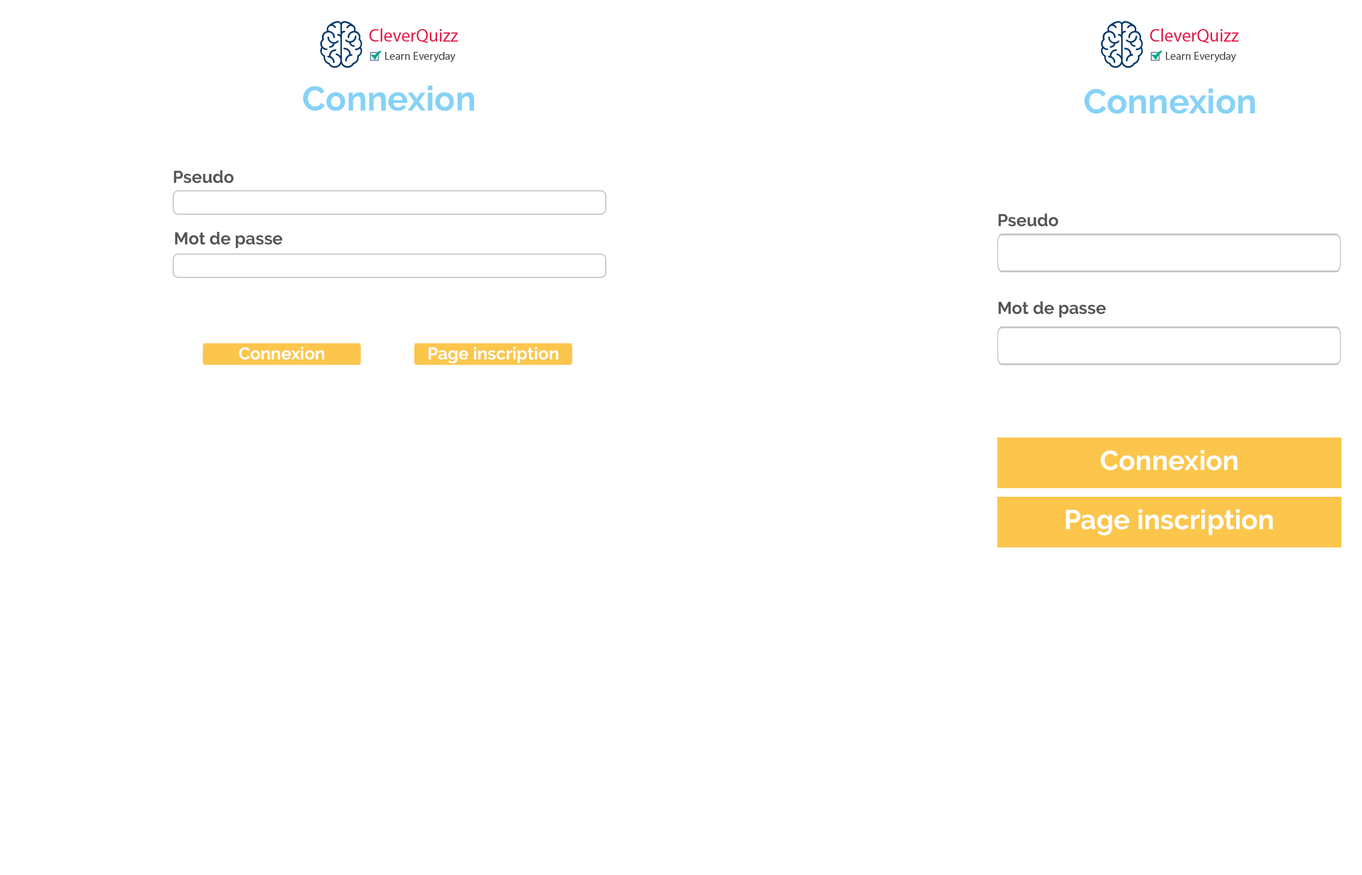
<style>
.page{position:relative;width:1362px;height:875px;background:#ffffff}
.page>*{position:absolute;margin:0}
.t1{font:34.2px "Raleway-Bold";color:#86d2f7}
.t2{font:17.1px "Raleway-Bold";color:#555555}
.t3{font:17.1px "Raleway-Bold";color:#ffffff}
.t4{font:27.4px "Raleway-Bold";color:#ffffff}
</style>
<div class="page">
<p class="t1" style="left:303px;top:85px;width:171px;height:26px">Connexion</p>
<p class="t1" style="left:1084px;top:88px;width:171px;height:26px">Connexion</p>
<p class="t2" style="left:174px;top:170px;width:60px;height:14px">Pseudo</p>
<p class="t2" style="left:999px;top:214px;width:59px;height:13px">Pseudo</p>
<p class="t2" style="left:175px;top:232px;width:108px;height:16px">Mot de passe</p>
<p class="t2" style="left:999px;top:301px;width:107px;height:17px">Mot de passe</p>
<p class="t3" style="left:239px;top:347px;width:85px;height:13px">Connexion</p>
<p class="t3" style="left:429px;top:347px;width:130px;height:17px">Page inscription</p>
<p class="t4" style="left:1101px;top:450px;width:137px;height:21px">Connexion</p>
<p class="t4" style="left:1066px;top:510px;width:207px;height:26px">Page inscription</p>
</div>
